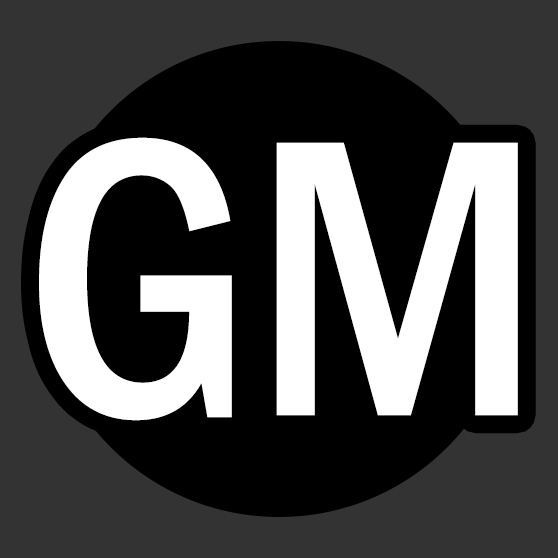
<style>
.page{position:relative;width:558px;height:558px;background:#000000}
.page>*{position:absolute;margin:0}
.t1{font:408.4px "FranklinGothic-MediumCond";color:#ffffff}
</style>
<div class="page">
<p class="t1" style="left:39px;top:137px;width:479px;height:284px">GM</p>
</div>
